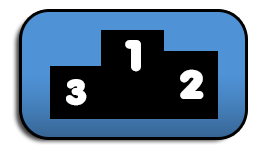
<style>
.page{position:relative;width:267px;height:150px;background:#000000}
.page>*{position:absolute;margin:0}
.t1{font:42.9px "Debussy";color:#ffffff}
.t2{font:40.2px "Debussy";color:#ffffff}
.t3{font:35.9px "Debussy";color:#ffffff}
</style>
<div class="page">
<p class="t1" style="left:125px;top:40px;width:16px;height:32px">1</p>
<p class="t2" style="left:180px;top:69px;width:24px;height:30px">2</p>
<p class="t3" style="left:66px;top:79px;width:21px;height:27px">3</p>
</div>
